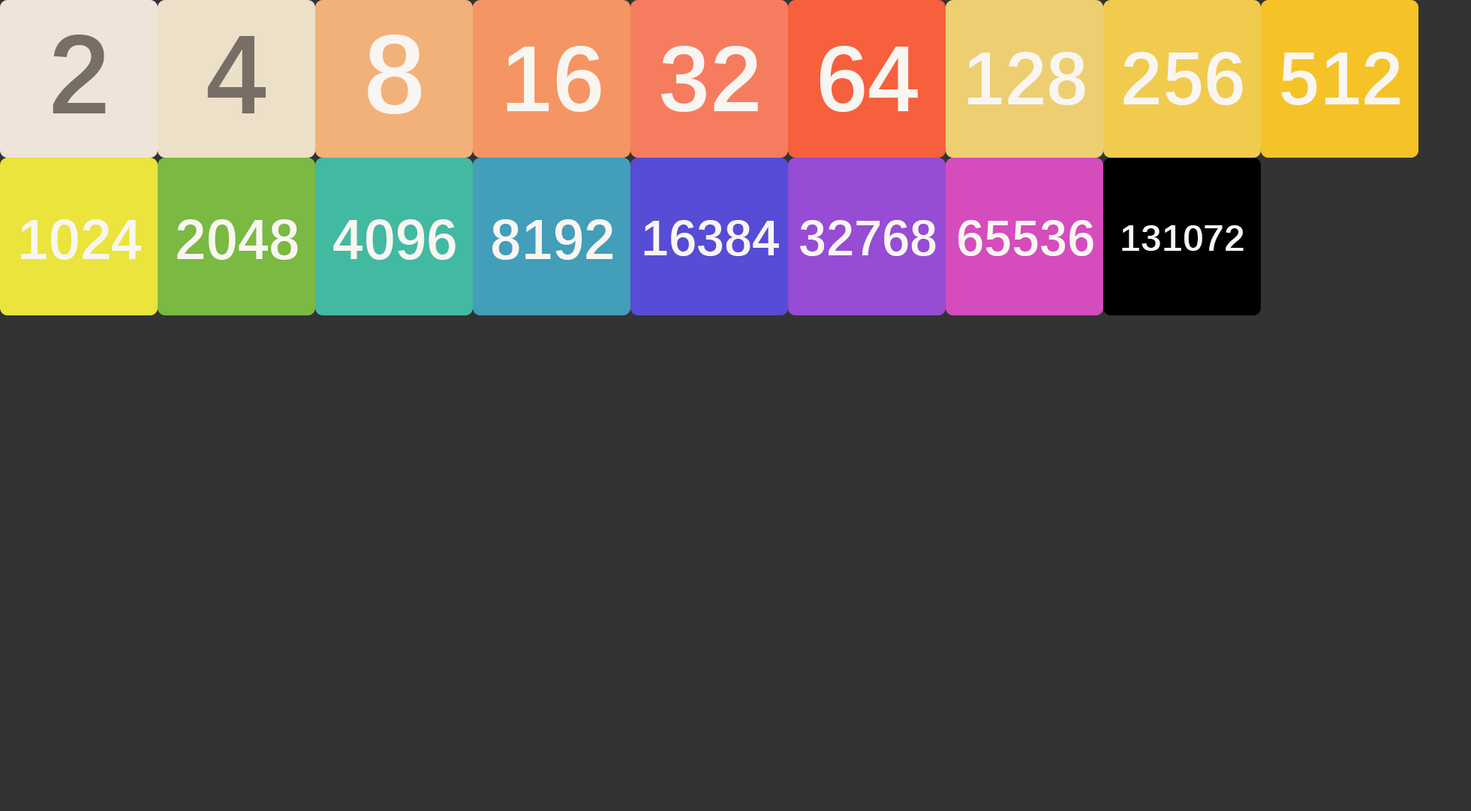
<style>
.page{position:relative;width:1471px;height:811px;background:#333333}
.page>*{position:absolute;margin:0}
.t1{font:112.6px "DengXian-Bold";color:#776e65}
.t2{font:112.6px "DengXian-Bold";color:#f9f6f2}
.t3{font:93.8px "DengXian-Bold";color:#f9f6f2}
.t4{font:75.1px "DengXian-Bold";color:#f9f6f2}
.t5{font:56.3px "DengXian-Bold";color:#f9f6f2}
.t6{font:50px "DengXian-Bold";color:#f9f6f2}
.t7{font:37.5px "DengXian-Bold";color:#f9f6f2}
</style>
<div class="page">
<p class="t1" style="left:53px;top:35px;width:53px;height:78px">2</p>
<p class="t1" style="left:207px;top:36px;width:59px;height:77px">4</p>
<p class="t2" style="left:368px;top:35px;width:53px;height:79px">8</p>
<p class="t3" style="left:507px;top:46px;width:94px;height:66px">16</p>
<p class="t3" style="left:661px;top:46px;width:97px;height:66px">32</p>
<p class="t3" style="left:820px;top:46px;width:98px;height:66px">64</p>
<p class="t4" style="left:968px;top:52px;width:117px;height:53px">128</p>
<p class="t4" style="left:1124px;top:52px;width:119px;height:53px">256</p>
<p class="t4" style="left:1281px;top:52px;width:119px;height:53px">512</p>
<p class="t5" style="left:21px;top:219px;width:120px;height:41px">1024</p>
<p class="t5" style="left:177px;top:219px;width:121px;height:41px">2048</p>
<p class="t5" style="left:333px;top:219px;width:123px;height:41px">4096</p>
<p class="t5" style="left:492px;top:219px;width:121px;height:41px">8192</p>
<p class="t6" style="left:644px;top:220px;width:135px;height:36px">16384</p>
<p class="t6" style="left:800px;top:220px;width:136px;height:36px">32768</p>
<p class="t6" style="left:958px;top:220px;width:136px;height:36px">65536</p>
<p class="t7" style="left:1122px;top:225px;width:122px;height:26px">131072</p>
</div>
